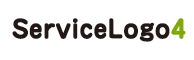
<style>
.page{position:relative;width:194px;height:60px;background:#ffffff}
.page>*{position:absolute;margin:0}
.t1{font:24px "Jun501Pro-Bold";color:#231815;font-weight:bold}
.t2{font:24px "Jun501Pro-Bold";color:#80a905;font-weight:bold}
</style>
<div class="page">
<p class="t1" style="left:12px;top:18px;width:174px;height:24px">ServiceLogo<span class="t2">4</span></p>
</div>
